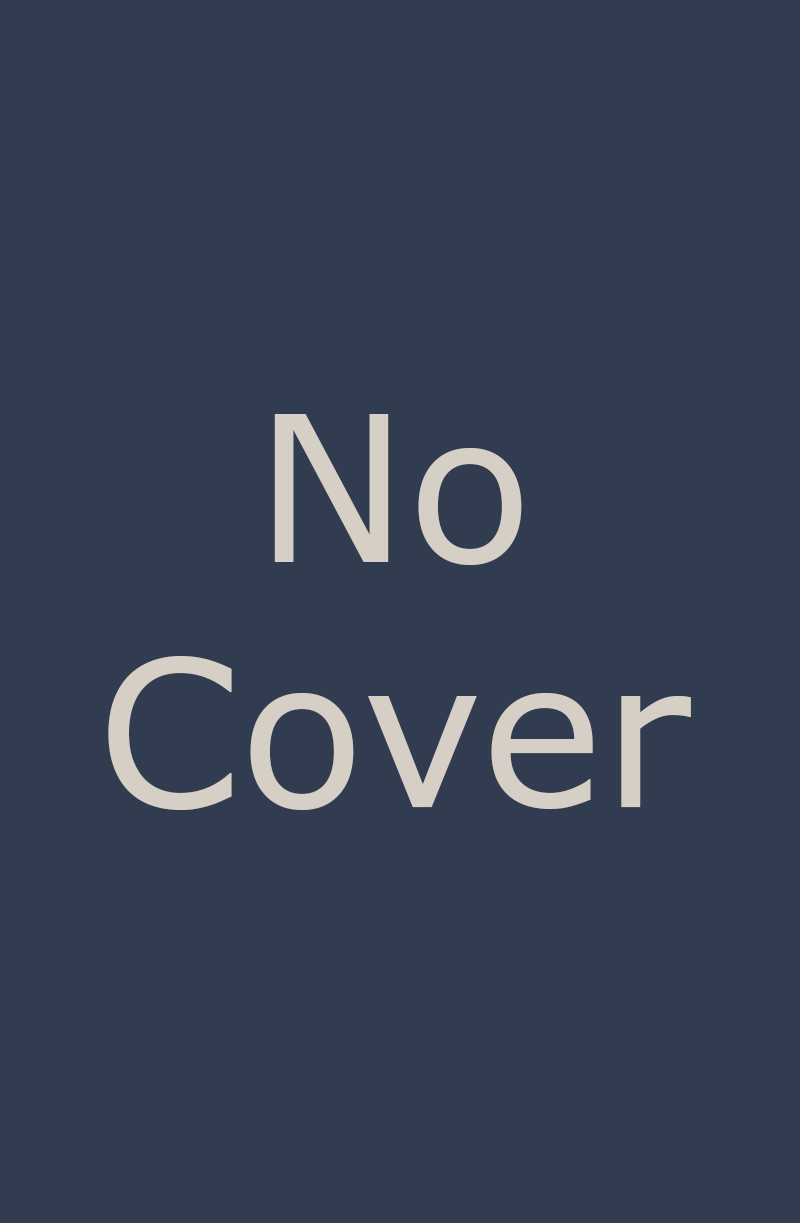
<style>
.page{position:relative;width:800px;height:1223px;background:#323c51}
.page>*{position:absolute;margin:0}
.t1{font:204.2px "Verdana";color:#d5cfc6}
</style>
<div class="page">
<p class="t1" style="left:108px;top:414px;width:583px;height:396px;text-align:center">No<br>Cover</p>
</div>
